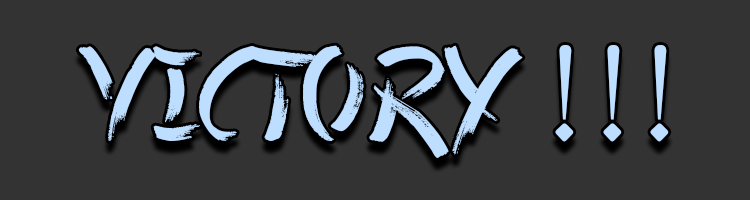
<style>
.page{position:relative;width:750px;height:200px;background:#333333}
.page>*{position:absolute;margin:0}
.t1{font:134.7px "ChineseTakeaway";color:#bddeff;scale:1.07 1}
</style>
<div class="page">
<p class="t1" style="left:78px;top:45px;width:591px;height:113px">VICTORY !!!</p>
</div>
